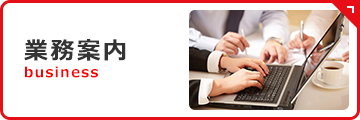
<style>
.page{position:relative;width:360px;height:120px;background:#ffffff}
.page>*{position:absolute;margin:0}
.t1{font:14px/18px "MeiryoUI-Bold";letter-spacing:0.1em;color:#ff0000}
.t2{font:24px/18px "MeiryoUI-Bold";letter-spacing:0.1em;color:#333333}
</style>
<div class="page">
<p class="t1" style="left:24px;top:39px;width:102px;height:39px"><span class="t2">業務案内<br></span>business</p>
</div>
